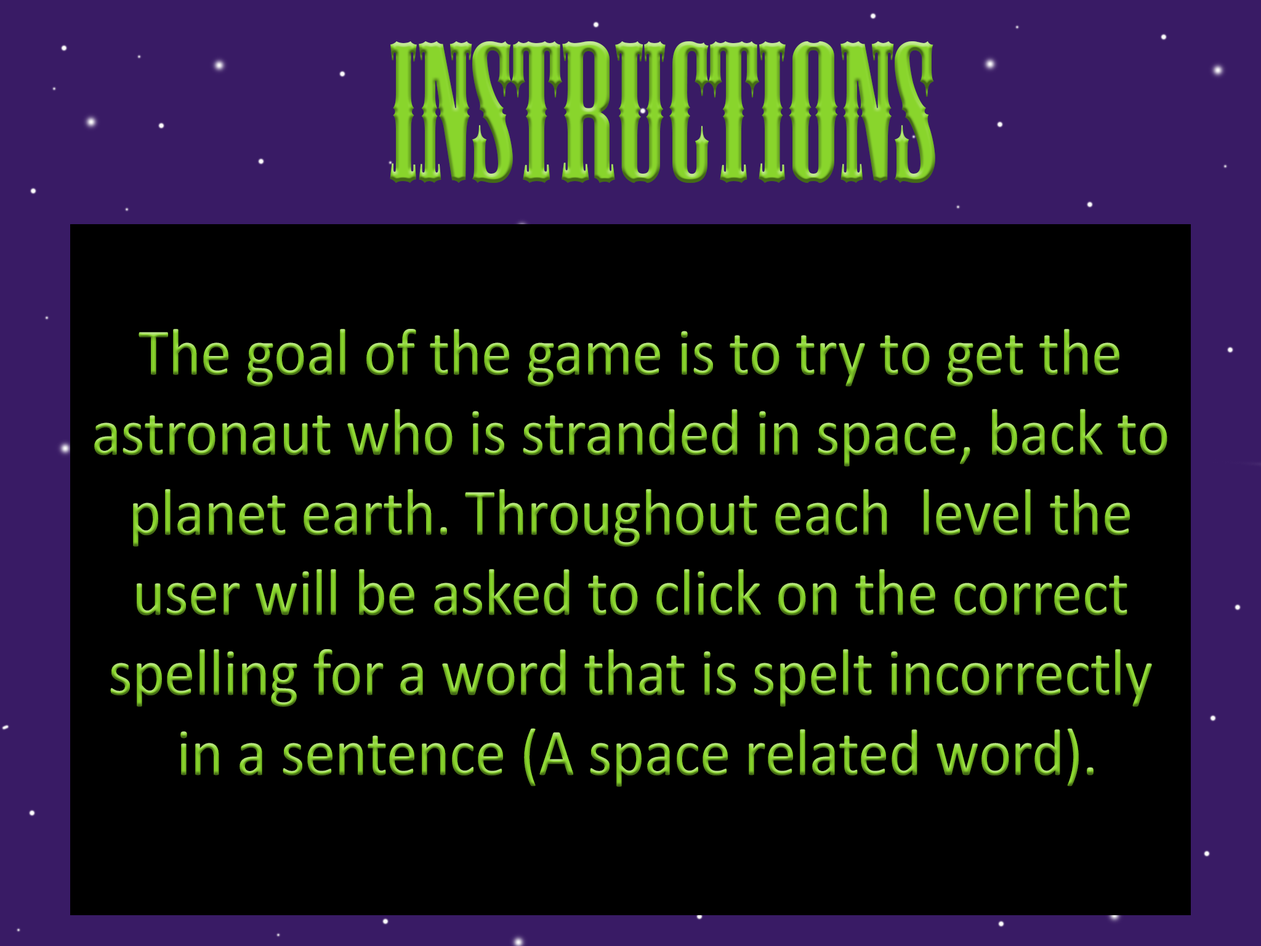
<style>
.page{position:relative;width:1261px;height:946px;background:#000000}
.page>*{position:absolute;margin:0}
.t1{font:184.7px "MesquiteStd";color:#89d52c}
.t2{font:66.7px "Calibri";scale:0.92 1}
</style>
<div class="page">
<p class="t1" style="left:390px;top:41px;width:545px;height:142px">Instructions</p>
<p class="t2" style="left:94px;top:329px;width:1073px;height:458px;text-align:center">The goal of the game is to try to get the <br>astronaut who is stranded in space, back to <br>planet earth. Throughout each  level the <br>user will be asked to click on the correct <br>spelling for a word that is spelt incorrectly <br>in a sentence (A space related word).</p>
</div>
